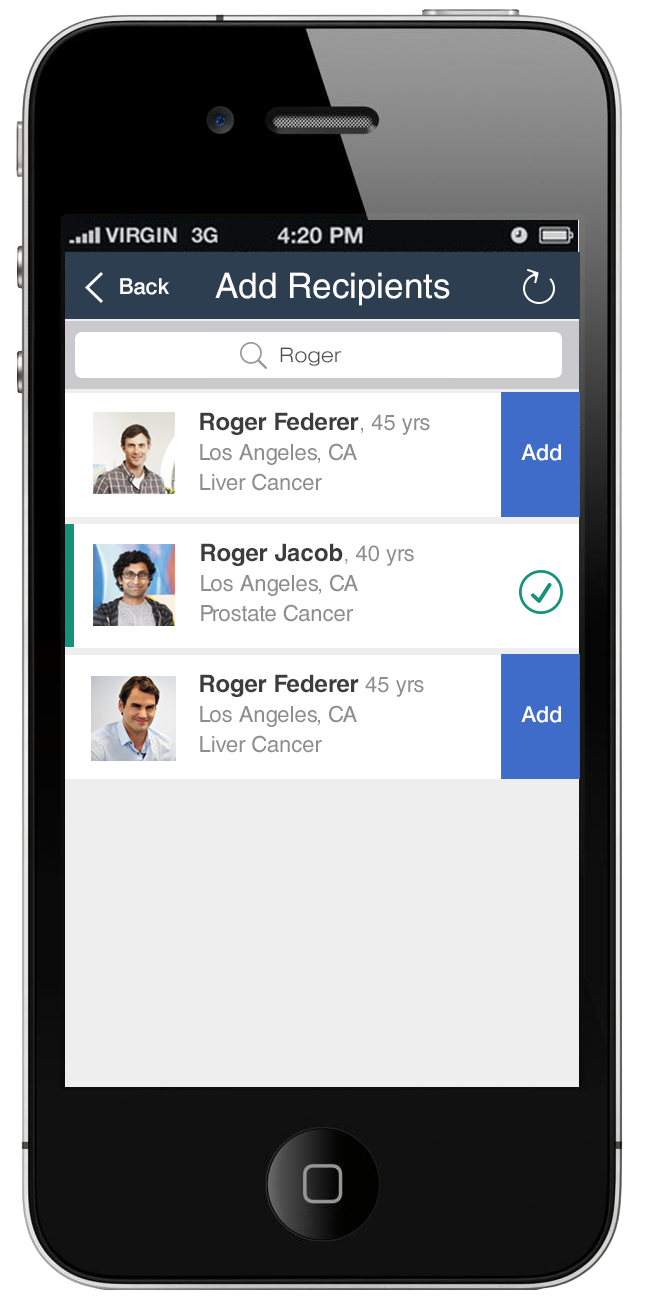
<style>
.page{position:relative;width:648px;height:1300px;background:#ffffff}
.page>*{position:absolute;margin:0}
.t1{font:22px "Swiss721BT-Medium";color:#ffffff}
.t2{font:35px "HelveticaLT";color:#ffffff}
.t3{font:20px "Swiss721BT-LightExtended";color:#505050}
.t4{font:22px/30px "HelveticaCE-Regular";color:#8d8d8d}
.t5{font:24px/30px "HelveticaCE-Bold";color:#3c3c3c}
</style>
<div class="page">
<p class="t1" style="left:120px;top:278px;width:49px;height:17px">Back</p>
<p class="t2" style="left:215px;top:272px;width:235px;height:34px">Add Recipients</p>
<p class="t3" style="left:280px;top:347px;width:62px;height:19px">Roger</p>
<p class="t4" style="left:200px;top:412px;width:230px;height:79px"><span class="t5">Roger Federer</span>, 45 yrs<br>Los Angeles, CA<br>Liver Cancer</p>
<p class="t1" style="left:521px;top:444px;width:40px;height:17px">Add</p>
<p class="t4" style="left:201px;top:543px;width:213px;height:79px"><span class="t5">Roger Jacob</span>, 40 yrs<br>Los Angeles, CA<br>Prostate Cancer</p>
<p class="t4" style="left:200px;top:674px;width:224px;height:79px"><span class="t5">Roger Federer</span> 45 yrs<br>Los Angeles, CA<br>Liver Cancer</p>
<p class="t1" style="left:521px;top:706px;width:40px;height:17px">Add</p>
</div>
